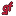
<style>
.page{position:relative;width:16px;height:16px;background:#ffffff}
.page>*{position:absolute;margin:0}
.t1{font:14px "FawnScript";color:#c4203b}
</style>
<div class="page">
<p class="t1" style="left:2px;top:1px;width:11px;height:14px">gf</p>
<p class="t1" style="left:2px;top:1px;width:11px;height:14px">gf</p>
</div>
